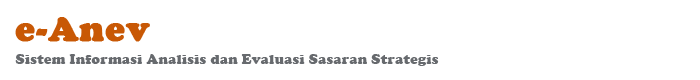
<style>
.page{position:relative;width:700px;height:80px;background:#ffffff}
.page>*{position:absolute;margin:0}
.t1{font:36px "CooperBlack";letter-spacing:0.025em;color:#c85805;font-weight:bold}
.t2{font:14px "CooperBlack";letter-spacing:0.025em;color:#676a6e}
</style>
<div class="page">
<p class="t1" style="left:15px;top:17px;width:135px;height:25px">e-Anev</p>
<p class="t2" style="left:15px;top:54px;width:424px;height:12px">Sistem Informasi Analisis dan Evaluasi Sasaran Strategis</p>
</div>
